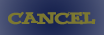
<style>
.page{position:relative;width:104px;height:35px}
.page>*{position:absolute;margin:0}
.t1{font:18.7px "VNI-Yahoo";letter-spacing:-0.05em;color:#7c7830}
</style>
<div class="page">
<p class="t1" style="left:8px;top:11px;width:88px;height:14px">cancel</p>
</div>
